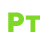
<style>
.page{position:relative;width:48px;height:48px;background:#ffffff}
.page>*{position:absolute;margin:0}
.t1{font:25px "PRIMETIME-Regular";color:#7fd826}
</style>
<div class="page">
<p class="t1" style="left:8px;top:12px;width:32px;height:20px">Pt</p>
</div>
